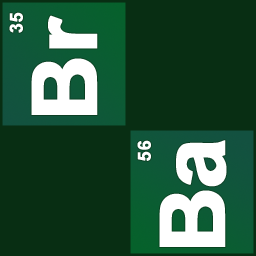
<style>
.page{position:relative;width:256px;height:256px;background:#082e13}
.page>*{position:absolute;margin:0}
.t1{font:18px "Arial-BoldMT";letter-spacing:0.02em;color:#ffffff;font-weight:bold}
.t2{font:90px "Arial-BoldMT";color:#ffffff;font-weight:bold}
.t3{font:90px "Arial-BoldMT";letter-spacing:-0.04em;color:#ffffff;font-weight:bold}
</style>
<div class="page">
<p class="t1" style="left:9px;top:12px;width:14px;height:21px;rotate:-90deg">35</p>
<p class="t2" style="left:31px;top:15px;width:67px;height:100px;rotate:-90deg">Br</p>
<p class="t1" style="left:137px;top:140px;width:14px;height:21px;rotate:-90deg">56</p>
<p class="t3" style="left:159px;top:140px;width:68px;height:107px;rotate:-90deg">Ba</p>
</div>
